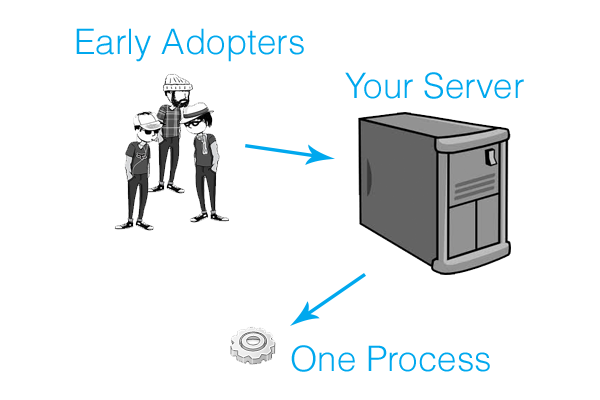
<style>
.page{position:relative;width:600px;height:400px;background:#ffffff}
.page>*{position:absolute;margin:0}
.t1{font:35px "Helvetica-Light";color:#00a8ee}
</style>
<div class="page">
<p class="t1" style="left:76px;top:28px;width:228px;height:34px">Early Adopters</p>
<p class="t1" style="left:345px;top:72px;width:179px;height:27px">Your Server</p>
<p class="t1" style="left:291px;top:345px;width:199px;height:27px">One Process</p>
</div>
